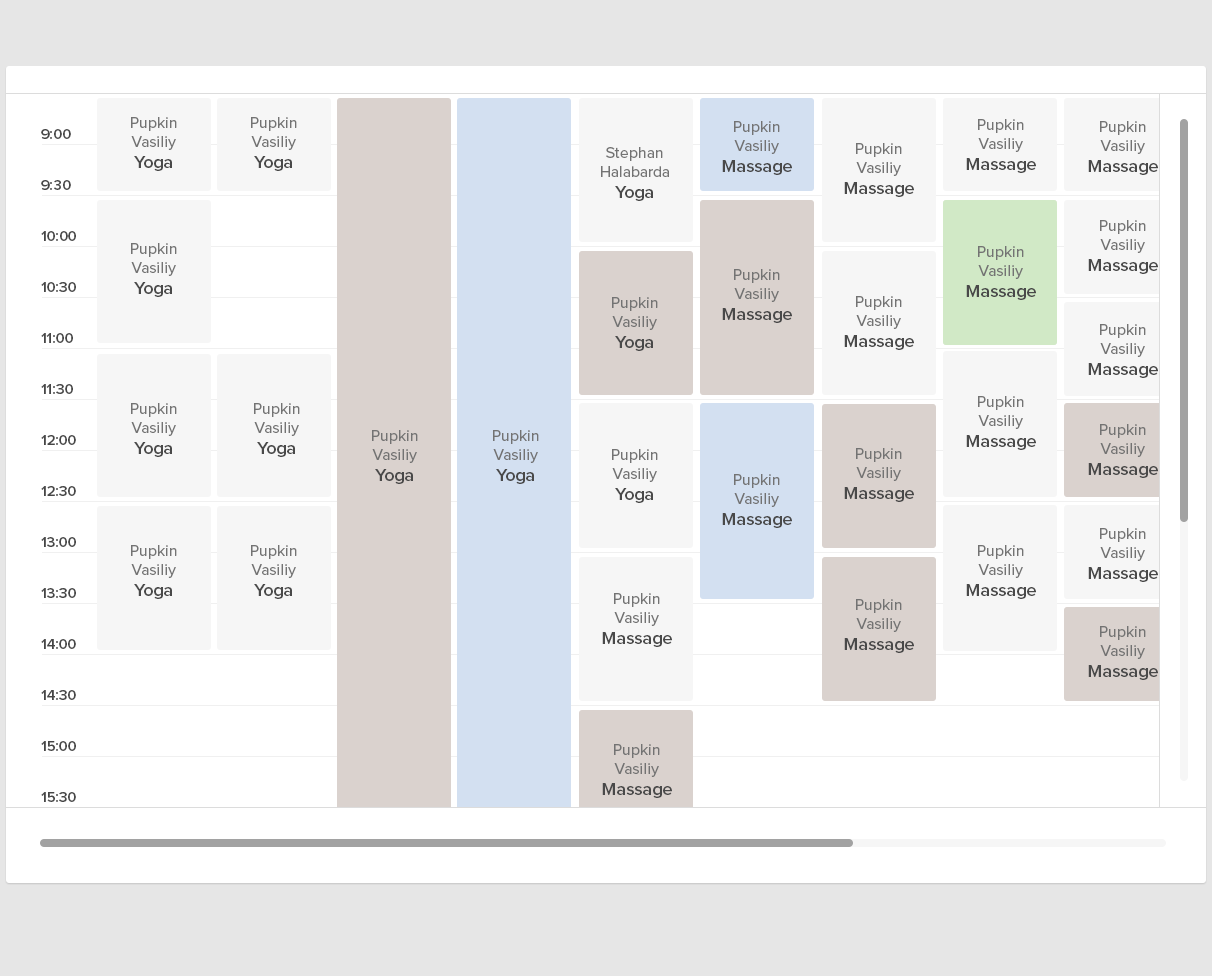
<style>
.page{position:relative;width:1212px;height:976px;background:#ffffff}
.page>*{position:absolute;margin:0}
.t1{font:16px "ProximaNova-Regular";color:#737373}
.t2{font:18px "ProximaNova-Semibold";color:#494949}
.t3{font:15px/51px "ProximaNova-Semibold";letter-spacing:-0.025em;color:#464646}
</style>
<div class="page">
<p class="t1" style="left:131px;top:117px;width:46px;height:54px;text-align:center">Pupkin <br>Vasiliy<br><span class="t2">Yoga</span></p>
<p class="t1" style="left:251px;top:117px;width:46px;height:54px;text-align:center">Pupkin <br>Vasiliy<br><span class="t2">Yoga</span></p>
<p class="t1" style="left:722px;top:121px;width:70px;height:54px;text-align:center">Pupkin <br>Vasiliy<br><span class="t2">Massage</span></p>
<p class="t1" style="left:966px;top:119px;width:70px;height:54px;text-align:center">Pupkin <br>Vasiliy<br><span class="t2">Massage</span></p>
<p class="t1" style="left:1088px;top:121px;width:70px;height:54px;text-align:center">Pupkin <br>Vasiliy<br><span class="t2">Massage</span></p>
<p class="t3" style="left:41px;top:129px;width:35px;height:673px">9:00<br>9:30 <br>10:00<br>10:30<br>11:00<br>11:30<br>12:00<br>12:30<br>13:00<br>13:30<br>14:00<br>14:30<br>15:00<br>15:30</p>
<p class="t1" style="left:601px;top:147px;width:68px;height:54px;text-align:center">Stephan<br>Halabarda<br><span class="t2">Yoga</span></p>
<p class="t1" style="left:844px;top:143px;width:70px;height:54px;text-align:center">Pupkin <br>Vasiliy<br><span class="t2">Massage</span></p>
<p class="t1" style="left:1088px;top:220px;width:70px;height:54px;text-align:center">Pupkin <br>Vasiliy<br><span class="t2">Massage</span></p>
<p class="t1" style="left:131px;top:243px;width:46px;height:54px;text-align:center">Pupkin <br>Vasiliy<br><span class="t2">Yoga</span></p>
<p class="t1" style="left:966px;top:246px;width:70px;height:54px;text-align:center">Pupkin <br>Vasiliy<br><span class="t2">Massage</span></p>
<p class="t1" style="left:722px;top:269px;width:70px;height:54px;text-align:center">Pupkin <br>Vasiliy<br><span class="t2">Massage</span></p>
<p class="t1" style="left:612px;top:297px;width:46px;height:54px;text-align:center">Pupkin <br>Vasiliy<br><span class="t2">Yoga</span></p>
<p class="t1" style="left:844px;top:296px;width:70px;height:54px;text-align:center">Pupkin <br>Vasiliy<br><span class="t2">Massage</span></p>
<p class="t1" style="left:1088px;top:324px;width:70px;height:54px;text-align:center">Pupkin <br>Vasiliy<br><span class="t2">Massage</span></p>
<p class="t1" style="left:966px;top:396px;width:70px;height:54px;text-align:center">Pupkin <br>Vasiliy<br><span class="t2">Massage</span></p>
<p class="t1" style="left:131px;top:403px;width:46px;height:54px;text-align:center">Pupkin <br>Vasiliy<br><span class="t2">Yoga</span></p>
<p class="t1" style="left:254px;top:403px;width:46px;height:54px;text-align:center">Pupkin <br>Vasiliy<br><span class="t2">Yoga</span></p>
<p class="t1" style="left:1088px;top:424px;width:70px;height:54px;text-align:center">Pupkin <br>Vasiliy<br><span class="t2">Massage</span></p>
<p class="t1" style="left:372px;top:430px;width:46px;height:54px;text-align:center">Pupkin <br>Vasiliy<br><span class="t2">Yoga</span></p>
<p class="t1" style="left:493px;top:430px;width:46px;height:54px;text-align:center">Pupkin <br>Vasiliy<br><span class="t2">Yoga</span></p>
<p class="t1" style="left:612px;top:449px;width:46px;height:54px;text-align:center">Pupkin <br>Vasiliy<br><span class="t2">Yoga</span></p>
<p class="t1" style="left:844px;top:448px;width:70px;height:54px;text-align:center">Pupkin <br>Vasiliy<br><span class="t2">Massage</span></p>
<p class="t1" style="left:722px;top:474px;width:70px;height:54px;text-align:center">Pupkin <br>Vasiliy<br><span class="t2">Massage</span></p>
<p class="t1" style="left:1088px;top:528px;width:70px;height:54px;text-align:center">Pupkin <br>Vasiliy<br><span class="t2">Massage</span></p>
<p class="t1" style="left:131px;top:545px;width:46px;height:54px;text-align:center">Pupkin <br>Vasiliy<br><span class="t2">Yoga</span></p>
<p class="t1" style="left:251px;top:545px;width:46px;height:54px;text-align:center">Pupkin <br>Vasiliy<br><span class="t2">Yoga</span></p>
<p class="t1" style="left:966px;top:545px;width:70px;height:54px;text-align:center">Pupkin <br>Vasiliy<br><span class="t2">Massage</span></p>
<p class="t1" style="left:602px;top:593px;width:70px;height:54px;text-align:center">Pupkin <br>Vasiliy<br><span class="t2">Massage</span></p>
<p class="t1" style="left:844px;top:599px;width:70px;height:54px;text-align:center">Pupkin <br>Vasiliy<br><span class="t2">Massage</span></p>
<p class="t1" style="left:1088px;top:626px;width:70px;height:54px;text-align:center">Pupkin <br>Vasiliy<br><span class="t2">Massage</span></p>
<p class="t1" style="left:602px;top:744px;width:70px;height:54px;text-align:center">Pupkin <br>Vasiliy<br><span class="t2">Massage</span></p>
</div>
